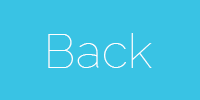
<style>
.page{position:relative;width:200px;height:100px;background:#39c3e4}
.page>*{position:absolute;margin:0}
.t1{font:48px "Raleway-Thin";color:#ffffff}
</style>
<div class="page">
<p class="t1" style="left:48px;top:33px;width:104px;height:35px">Back</p>
</div>
